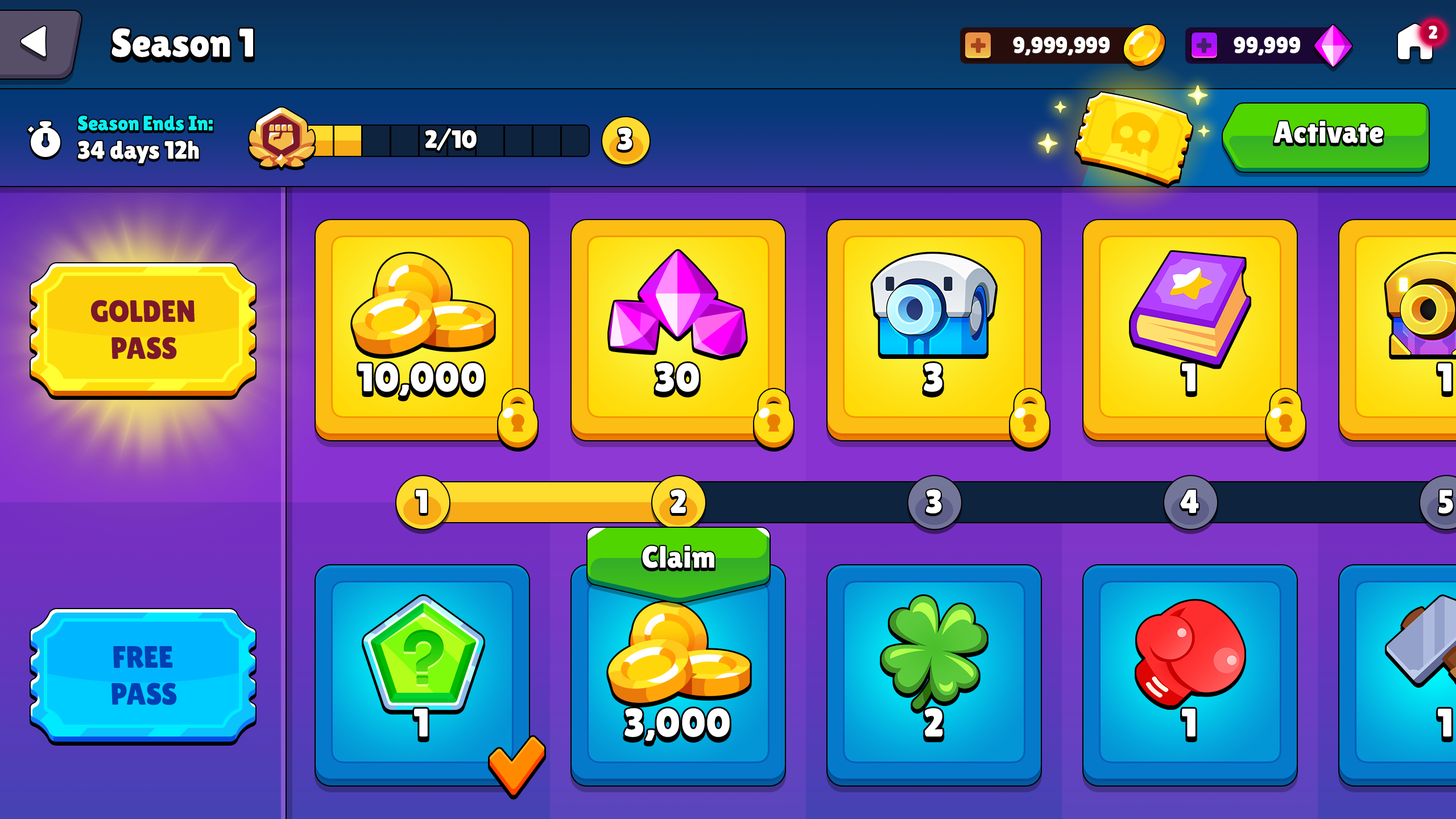
<style>
.page{position:relative;width:1456px;height:819px}
.page>*{position:absolute;margin:0}
.t1{font:39.8px "LilitaOne";color:#ffffff}
.t2{font:18.2px "LilitaOne";color:#ffffff;text-transform:uppercase}
.t3{font:22.7px "LilitaOne";letter-spacing:-0.01em;color:#ffffff;text-transform:uppercase}
.t4{font:20.5px "LilitaOne";color:#0eeef1}
.t5{font:30.7px "LilitaOne";letter-spacing:0.02em;color:#ffffff}
.t6{font:25px "LilitaOne";color:#ffffff}
.t7{font:30.7px "LilitaOne";color:#ffffff;text-transform:uppercase}
.t8{font:30.9px "LilitaOne";color:#7c182a;text-transform:uppercase}
.t9{font:39.8px "LilitaOne";letter-spacing:0.02em;color:#ffffff;text-transform:uppercase}
.t10{font:33px "LilitaOne";color:#ffffff;text-transform:uppercase}
.t11{font:30.9px "LilitaOne";color:#003fb4;text-transform:uppercase}
</style>
<div class="page">
<p class="t1" style="left:111px;top:28px;width:142px;height:29px">Season 1</p>
<p class="t2" style="left:1429px;top:26px;width:8px;height:13px">2</p>
<p class="t3" style="left:1013px;top:36px;width:97px;height:20px">9,999,999</p>
<p class="t3" style="left:1234px;top:36px;width:66px;height:20px">99,999</p>
<p class="t4" style="left:78px;top:115px;width:135px;height:16px">Season Ends In:</p>
<p class="t5" style="left:1273px;top:121px;width:110px;height:22px">Activate</p>
<p class="t6" style="left:425px;top:128px;width:52px;height:23px">2/10</p>
<p class="t7" style="left:618px;top:127px;width:14px;height:23px">3</p>
<p class="t6" style="left:78px;top:140px;width:121px;height:23px">34 days 12h</p>
<p class="t8" style="left:91px;top:300px;width:104px;height:59px;text-align:center">Golden<br>pass</p>
<p class="t9" style="left:358px;top:363px;width:126px;height:33px">10,000</p>
<p class="t9" style="left:655px;top:363px;width:44px;height:29px">30</p>
<p class="t9" style="left:924px;top:363px;width:18px;height:29px">3</p>
<p class="t9" style="left:1182px;top:363px;width:13px;height:28px">1</p>
<p class="t9" style="left:1438px;top:363px;width:13px;height:28px">1</p>
<p class="t10" style="left:415px;top:490px;width:12px;height:23px">1</p>
<p class="t10" style="left:671px;top:489px;width:15px;height:24px">2</p>
<p class="t10" style="left:926px;top:489px;width:16px;height:25px">3</p>
<p class="t10" style="left:1180px;top:490px;width:19px;height:23px">4</p>
<p class="t10" style="left:1438px;top:490px;width:15px;height:24px">5</p>
<p class="t5" style="left:642px;top:545px;width:72px;height:23px">Claim</p>
<p class="t11" style="left:111px;top:646px;width:66px;height:59px;text-align:center">Free<br>pass</p>
<p class="t9" style="left:414px;top:709px;width:14px;height:28px">1</p>
<p class="t9" style="left:624px;top:708px;width:106px;height:33px">3,000</p>
<p class="t9" style="left:925px;top:708px;width:18px;height:29px">2</p>
<p class="t9" style="left:1182px;top:709px;width:13px;height:28px">1</p>
<p class="t9" style="left:1438px;top:709px;width:13px;height:28px">1</p>
</div>
